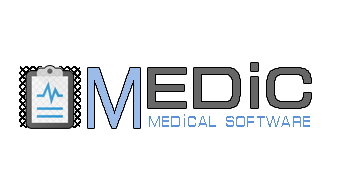
<style>
.page{position:relative;width:339px;height:186px;background:#ffffff}
.page>*{position:absolute;margin:0}
.t1{font:67px "MicraDi";color:#666666}
.t2{font:67px "MicraDi";color:#9bbce8}
.t3{font:19px "MicraDi";letter-spacing:0.1em;color:#5c92da;scale:0.65 1}
</style>
<div class="page">
<p class="t1" style="left:148px;top:63px;width:163px;height:45px"><span class="t2">  </span>edic</p>
<p class="t3" style="left:149px;top:114px;width:161px;height:13px">medical software</p>
</div>
